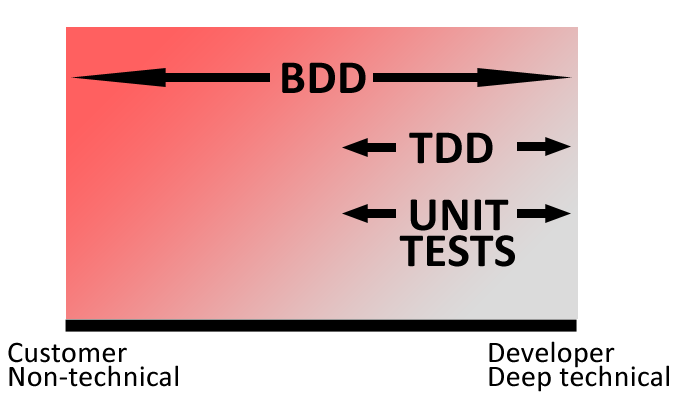
<style>
.page{position:relative;width:677px;height:400px;background:#ffffff}
.page>*{position:absolute;margin:0}
.t1{font:48px "Calibri-Bold";letter-spacing:0.01em;color:#000000}
.t2{font:48px/36px "Calibri-Bold";letter-spacing:0.01em;color:#000000}
.t3{font:30px/24px "Calibri";letter-spacing:0.01em;color:#000000}
</style>
<div class="page">
<p class="t1" style="left:282px;top:62px;width:84px;height:31px">BDD</p>
<p class="t1" style="left:409px;top:132px;width:84px;height:32px">TDD</p>
<p class="t2" style="left:399px;top:199px;width:116px;height:68px;text-align:center">UNIT <br>TESTS</p>
<p class="t3" style="left:8px;top:342px;width:170px;height:45px">Customer<br>Non-technical</p>
<p class="t3" style="left:489px;top:341px;width:180px;height:51px">Developer<br>Deep technical</p>
</div>
